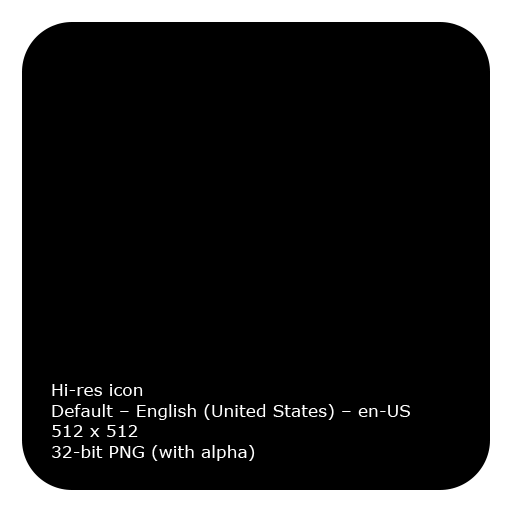
<style>
.page{position:relative;width:512px;height:512px;background:#000000}
.page>*{position:absolute;margin:0}
.t1{font:17.1px "Verdana";color:#ffffff}
</style>
<div class="page">
<p class="t1" style="left:52px;top:384px;width:358px;height:77px">Hi-res icon <br>Default – English (United States) – en-US<br>512 x 512<br>32-bit PNG (with alpha)</p>
</div>
